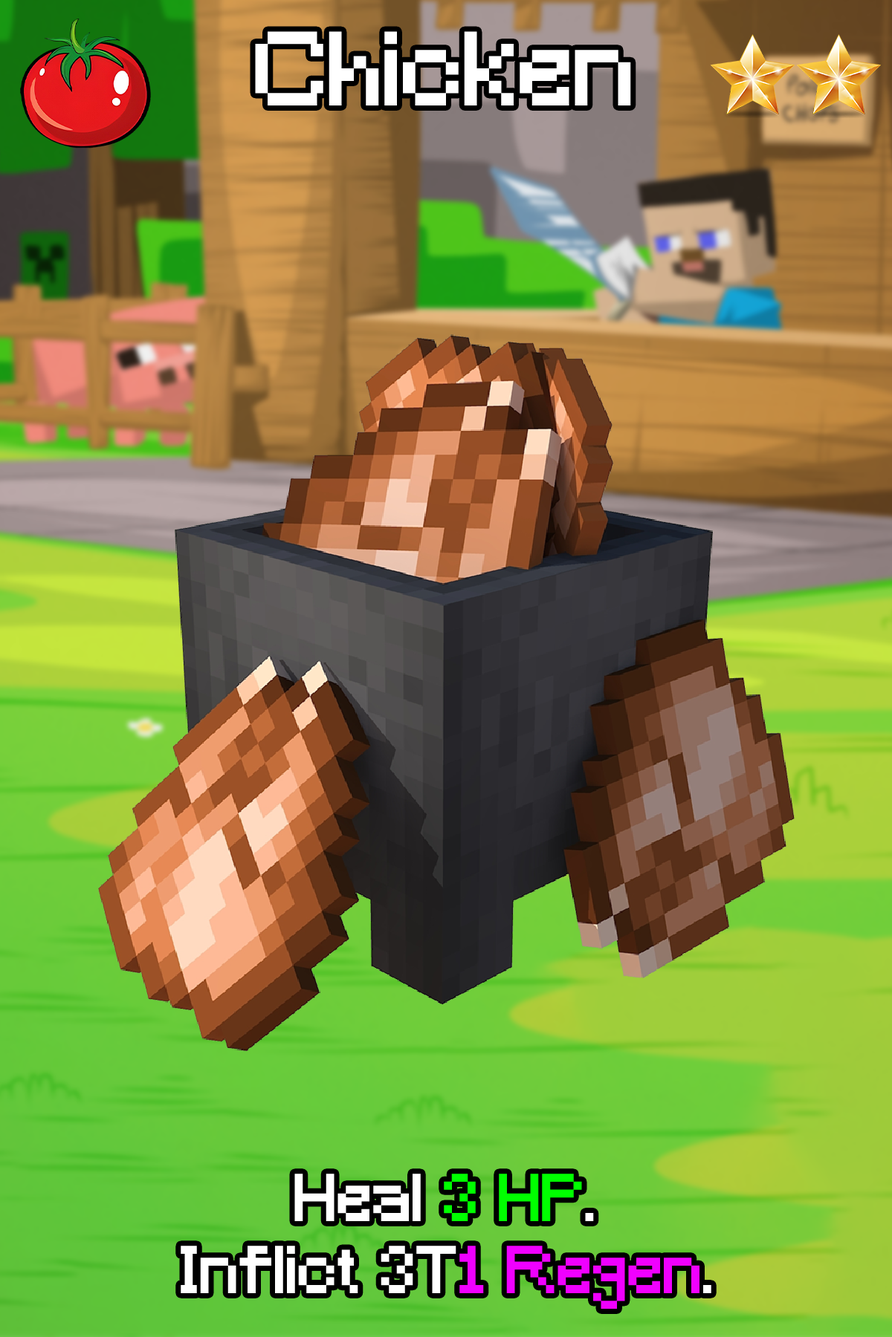
<style>
.page{position:relative;width:892px;height:1337px}
.page>*{position:absolute;margin:0}
.t1{font:168.7px "Minecraft";color:#ffffff}
.t2{font:107.7px/72.1px "Minecraft";color:#ffffff}
.t3{font:107.7px/72.1px "Minecraft";color:#00ff00}
.t4{font:107.7px/72.1px "Minecraft";color:#f000ff}
</style>
<div class="page">
<p class="t1" style="left:255px;top:31px;width:376px;height:75px">Chicken</p>
<p class="t2" style="left:181px;top:1174px;width:530px;height:135px;text-align:center">Heal <span class="t3">3 HP</span>.<br>Inflict 3T<span class="t4">1 Regen</span>.</p>
</div>
